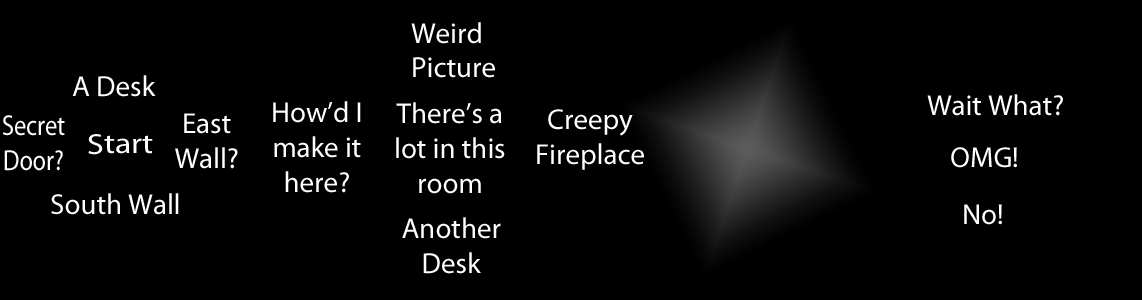
<style>
.page{position:relative;width:1142px;height:300px;background:#000000}
.page>*{position:absolute;margin:0}
.t1{font:29.1px "MyriadPro-Regular";color:#ffffff}
.t2{font:29.1px "MyriadPro-Regular";color:#ffffff;scale:0.84 1}
.t3{font:29.1px "MyriadPro-Regular";color:#ffffff;scale:1.16 1}
</style>
<div class="page">
<p class="t1" style="left:411px;top:22px;width:84px;height:56px">Weird Picture</p>
<p class="t1" style="left:72px;top:75px;width:84px;height:22px">A Desk</p>
<p class="t1" style="left:273px;top:101px;width:88px;height:92px;text-align:center">How’d I make it here?</p>
<p class="t1" style="left:396px;top:102px;width:109px;height:92px;text-align:center">There’s a lot in this room</p>
<p class="t1" style="left:927px;top:94px;width:136px;height:22px">Wait What?</p>
<p class="t1" style="left:175px;top:113px;width:63px;height:56px;text-align:center">East Wall?</p>
<p class="t1" style="left:537px;top:109px;width:107px;height:61px;text-align:center">Creepy Fireplace</p>
<p class="t2" style="left:3px;top:115px;width:62px;height:56px;text-align:center">Secret Door?</p>
<p class="t3" style="left:88px;top:134px;width:65px;height:21px">Start</p>
<p class="t1" style="left:951px;top:147px;width:66px;height:21px">OMG!</p>
<p class="t1" style="left:51px;top:193px;width:128px;height:22px">South Wall</p>
<p class="t1" style="left:964px;top:204px;width:38px;height:21px">No!</p>
<p class="t1" style="left:402px;top:217px;width:99px;height:57px;text-align:center">Another Desk</p>
</div>
